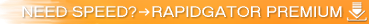
<style>
.page{position:relative;width:369px;height:25px}
.page>*{position:absolute;margin:0}
.t1{font:15px "MS Sans Serif";color:#ffffff;scale:1.12 1}
</style>
<div class="page">
<p class="t1" style="left:22px;top:6px;width:320px;height:11px">NEED SPEED?   RAPIDGATOR PREMIUM</p>
</div>
